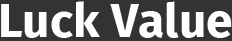
<style>
.page{position:relative;width:232px;height:41px;background:#333333}
.page>*{position:absolute;margin:0}
.t1{font:48px "FiraSans-Bold";color:#ffffff}
</style>
<div class="page">
<p class="t1" style="left:1px;top:1px;width:231px;height:37px">Luck Value</p>
</div>
